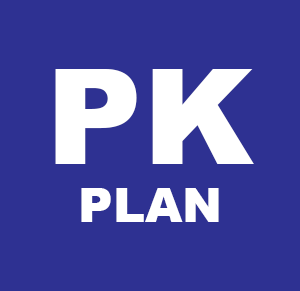
<style>
.page{position:relative;width:300px;height:291px;background:#2e3192}
.page>*{position:absolute;margin:0}
.t1{font:48px "Arial-Black";color:#ffffff}
.t2{font:133.3px "Arial-Black";color:#ffffff}
</style>
<div class="page">
<p class="t1" style="left:55px;top:69px;width:199px;height:153px;text-align:center"><span class="t2">PK<br></span>PLAN</p>
</div>
